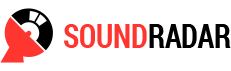
<style>
.page{position:relative;width:231px;height:71px;background:#ffffff}
.page>*{position:absolute;margin:0}
.t1{font:32.6px "RobotoCondensed-Bold";color:#ff3530;text-transform:uppercase;scale:0.91 1}
.t2{font:32.6px "RobotoCondensed-Bold";color:#000000;text-transform:uppercase;scale:0.91 1}
</style>
<div class="page">
<p class="t1" style="left:64px;top:24px;width:167px;height:24px">Sound<span class="t2">Radar</span></p>
</div>
